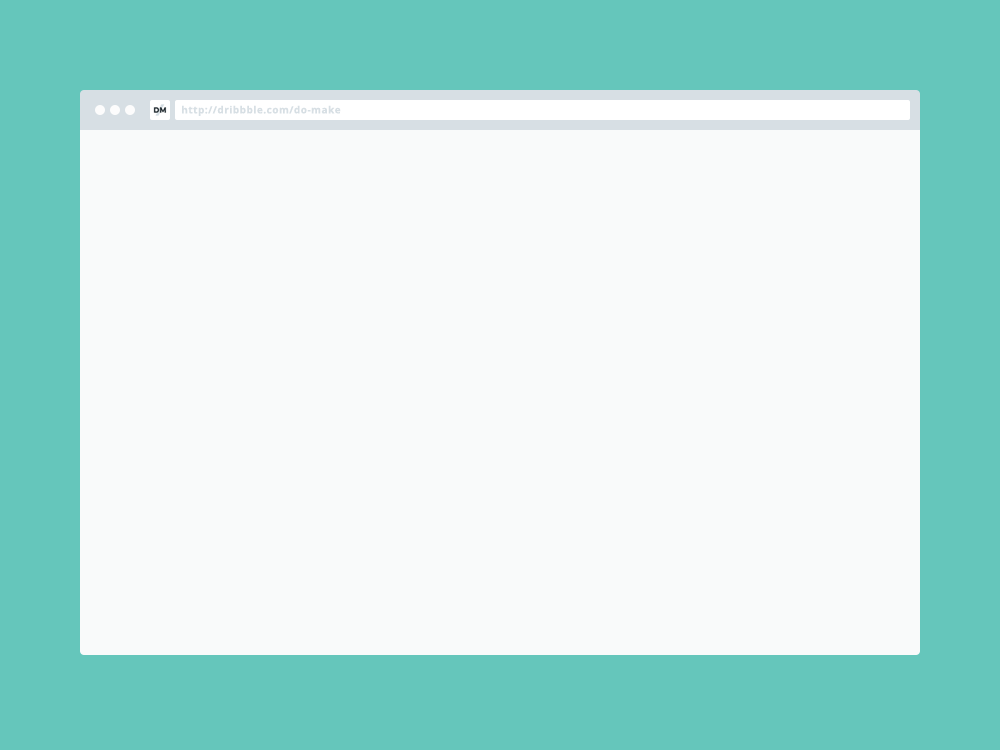
<style>
.page{position:relative;width:1000px;height:750px;background:#f9fafa}
.page>*{position:absolute;margin:0}
.t1{font:10px "OpenSans-Bold";letter-spacing:0.05em;color:#d7dfe4}
</style>
<div class="page">
<p class="t1" style="left:182px;top:105px;width:159px;height:11px">http://dribbble.com/do-make</p>
</div>
